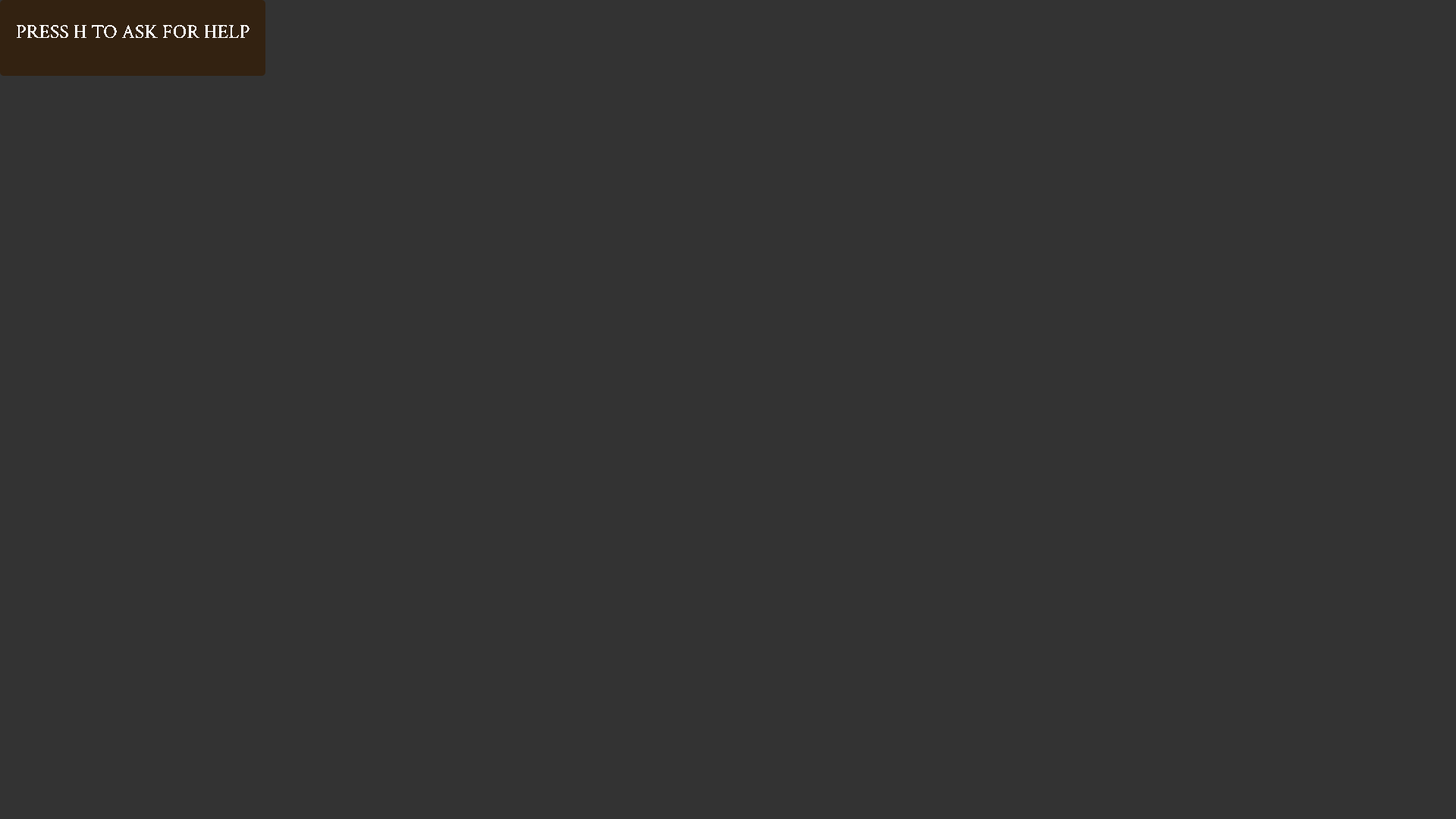
<style>
.page{position:relative;width:1456px;height:819px;background:#333333}
.page>*{position:absolute;margin:0}
.t1{font:19.7px "CrimsonText-Regular";color:#ffffff}
</style>
<div class="page">
<p class="t1" style="left:17px;top:25px;width:232px;height:13px">PRESS H TO ASK FOR HELP</p>
</div>
